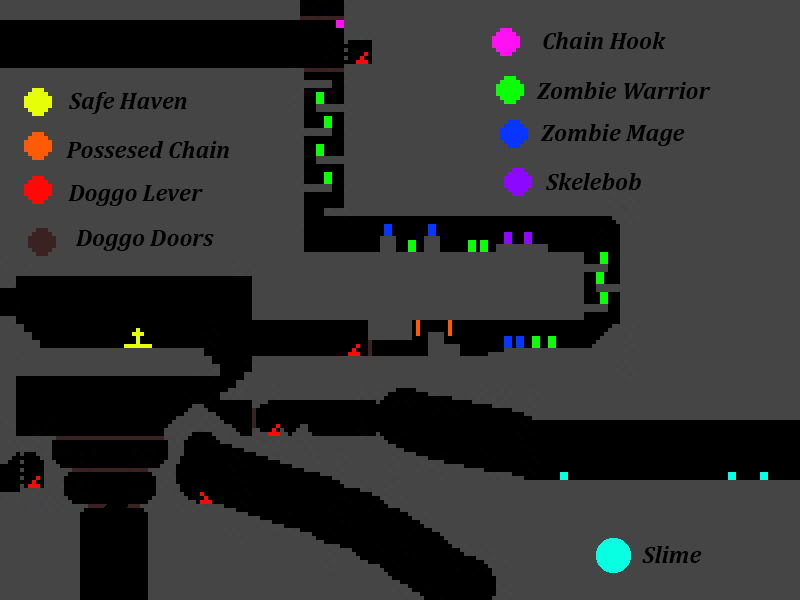
<style>
.page{position:relative;width:800px;height:600px;background:#454545}
.page>*{position:absolute;margin:0}
.t1{font:24px "Cambria-BoldItalic";color:#000000}
</style>
<div class="page">
<p class="t1" style="left:543px;top:32px;width:123px;height:17px">Chain Hook</p>
<p class="t1" style="left:536px;top:82px;width:175px;height:17px">Zombie Warrior</p>
<p class="t1" style="left:69px;top:92px;width:118px;height:22px">Safe Haven</p>
<p class="t1" style="left:540px;top:124px;width:145px;height:22px">Zombie Mage</p>
<p class="t1" style="left:66px;top:141px;width:163px;height:17px">Possesed Chain</p>
<p class="t1" style="left:546px;top:173px;width:95px;height:17px">Skelebob</p>
<p class="t1" style="left:68px;top:185px;width:135px;height:21px">Doggo Lever</p>
<p class="t1" style="left:76px;top:230px;width:138px;height:21px">Doggo Doors</p>
<p class="t1" style="left:642px;top:546px;width:60px;height:17px">Slime</p>
</div>
